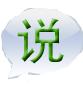
<style>
.page{position:relative;width:83px;height:85px;background:#ffffff}
.page>*{position:absolute;margin:0}
.t1{font:50px "AdobeHeitiStd-Regular"}
.t2{font:38px "AdobeHeitiStd-Regular"}
.t3{font:38px "SimSun"}
</style>
<div class="page">
<p class="t1" style="left:17px;top:18px;width:47px;height:46px;text-align:center">说<br><span class="t2"><br>s<br></span><span class="t3"><br>说</span></p>
</div>
